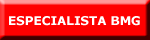
<style>
.page{position:relative;width:150px;height:40px;background:#ff0000}
.page>*{position:absolute;margin:0}
.t1{font:12px "Verdana-Bold";color:#ffffff}
</style>
<div class="page">
<p class="t1" style="left:9px;top:16px;width:131px;height:10px">ESPECIALISTA BMG</p>
</div>
